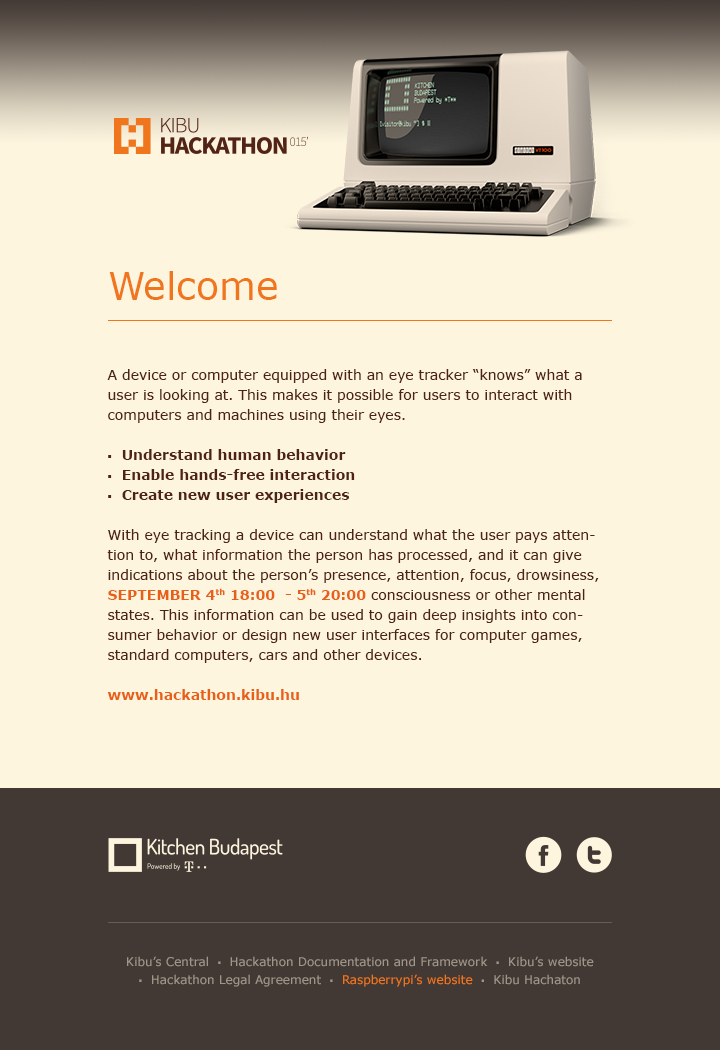
<style>
.page{position:relative;width:720px;height:1050px;background:#fef5df}
.page>*{position:absolute;margin:0}
.t1{font:14px/20px "Verdana";color:#4f2313}
.t2{font:38px/20px "Verdana";color:#f0761d}
.t3{font:14px/20px "SourceSansPro-Regular";color:#4f2313}
.t4{font:14px/20px "Verdana-Bold";color:#4f2313}
.t5{font:14px/20px "Verdana-Bold";color:#e86018;text-transform:uppercase}
.t6{font:14px/20px "Verdana-Bold";color:#e86018}
.t7{font:12px/18px "Verdana";color:#9f9689}
.t8{font:12px/18px "SourceSansPro-Regular";color:#9f9689}
.t9{font:12px/18px "Verdana";color:#f0761d}
</style>
<div class="page">
<p class="t1" style="left:107px;top:271px;width:492px;height:429px"><span class="t2">Welcome<br><br></span><br><br>A device or computer equipped with an eye tracker “knows” what a user is looking at. This makes it possible for users to interact with computers and machines using their eyes.<br><br><span class="t3">■  </span><span class="t4">Understand human behavior<br></span><span class="t3">■  </span><span class="t4">Enable hands-free interaction<br></span><span class="t3">■  </span><span class="t4">Create new user experiences<br></span><br>With eye tracking a device can understand what the user pays attention to, what information the person has processed, and it can give indications about the person’s presence, attention, focus, drowsiness,         <span class="t5">September 4</span><span class="t6">th 18:00  - </span><span class="t5">5</span><span class="t6">th 20:00 </span>consciousness or other mental states. This information can be used to gain deep insights into consumer behavior or design new user interfaces for computer games, standard computers, cars and other devices.<br><br><span class="t6">www.hackathon.kibu.hu</span></p>
<p class="t7" style="left:127px;top:956px;width:467px;height:31px;text-align:center">Kibu’s Central  <span class="t8">■</span>  Hackathon Documentation and Framework  <span class="t8">■</span>  Kibu’s website   <br><span class="t8">■</span>  Hackathon Legal Agreement  <span class="t8">■  </span><span class="t9">Raspberrypi’s website  </span><span class="t8">■</span>  Kibu Hachaton</p>
</div>
